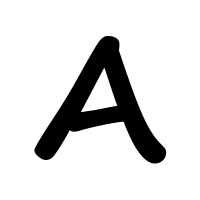
<style>
.page{position:relative;width:200px;height:200px;background:#ffffff}
.page>*{position:absolute;margin:0}
.t1{font:170px "SegoePrint-Bold";color:#000000}
</style>
<div class="page">
<p class="t1" style="left:34px;top:36px;width:133px;height:128px">A</p>
</div>
